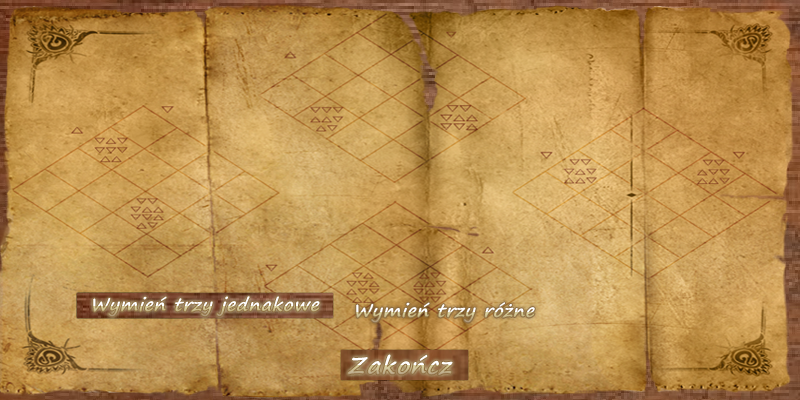
<style>
.page{position:relative;width:800px;height:400px}
.page>*{position:absolute;margin:0}
.t1{font:18px "SegoePrint-Bold";letter-spacing:0.025em;font-style:italic}
.t2{font:24px "SegoePrint-Bold";letter-spacing:0.025em;font-style:italic}
</style>
<div class="page">
<p class="t1" style="left:93px;top:296px;width:227px;height:21px">Wymień trzy jednakowe</p>
<p class="t1" style="left:356px;top:302px;width:179px;height:21px">Wymień trzy różne</p>
<p class="t2" style="left:347px;top:354px;width:106px;height:22px">Zakończ</p>
</div>
